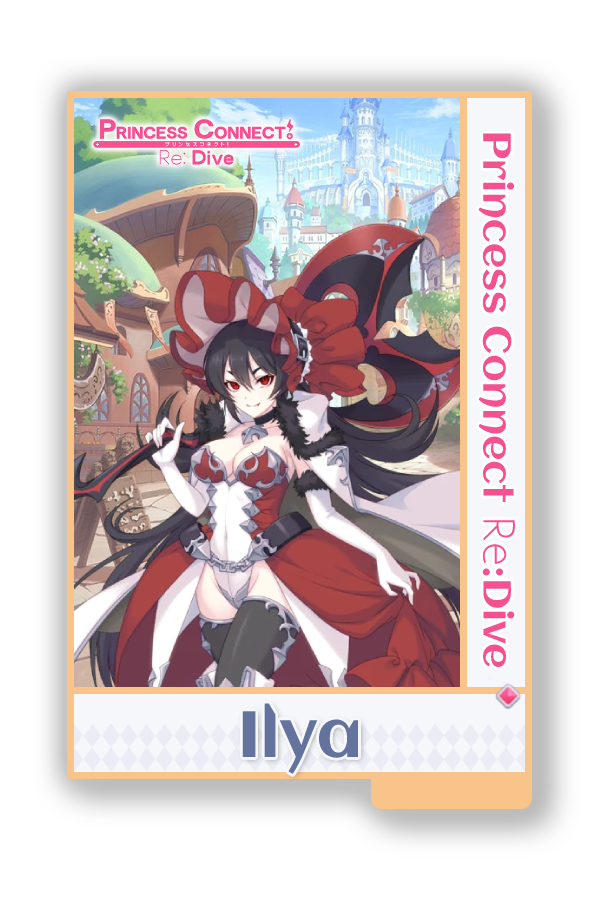
<style>
.page{position:relative;width:600px;height:900px;background:#ffffff}
.page>*{position:absolute;margin:0}
.t1{font:39px "Aclonica-Regular";color:#f55191}
.t2{font:39px "AaarghNormal";color:#f55191}
.t3{font:65px "Aclonica-Regular";color:#64739d}
</style>
<div class="page">
<p class="t1" style="left:478px;top:133px;width:38px;height:534px;rotate:90deg">Princess Connect <span class="t2">Re</span>:Dive</p>
<p class="t3" style="left:242px;top:703px;width:116px;height:71px">Ilya</p>
</div>
